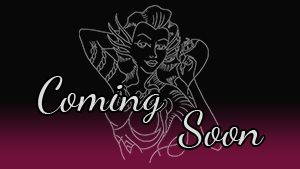
<style>
.page{position:relative;width:300px;height:169px;background:#080808}
.page>*{position:absolute;margin:0}
.t1{font:48px "DancingScript";color:#dddddd}
</style>
<div class="page">
<p class="t1" style="left:38px;top:76px;width:127px;height:47px">Coming</p>
<p class="t1" style="left:178px;top:110px;width:86px;height:38px">Soon</p>
</div>
